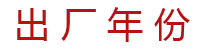
<style>
.page{position:relative;width:200px;height:50px;background:#ffffff}
.page>*{position:absolute;margin:0}
.t1{font:36px "MicrosoftYaHei";color:#b71111}
</style>
<div class="page">
<p class="t1" style="left:17px;top:7px;width:173px;height:35px">出 厂 年 份</p>
</div>
